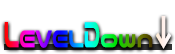
<style>
.page{position:relative;width:175px;height:54px;background:#ffffff}
.page>*{position:absolute;margin:0}
.t1{font:28.6px "NicoKaku";letter-spacing:-0.015em;scale:0.8 1}
.t2{font:42.9px "NicoKaku";letter-spacing:-0.015em;scale:0.53 1}
.t3{font:42.9px "NicoKaku";scale:0.67 1}
</style>
<div class="page">
<p class="t1" style="left:4px;top:16px;width:167px;height:33px"><span class="t2">L</span>EVEL<span class="t2">D</span>own<span class="t3">↓</span></p>
</div>
